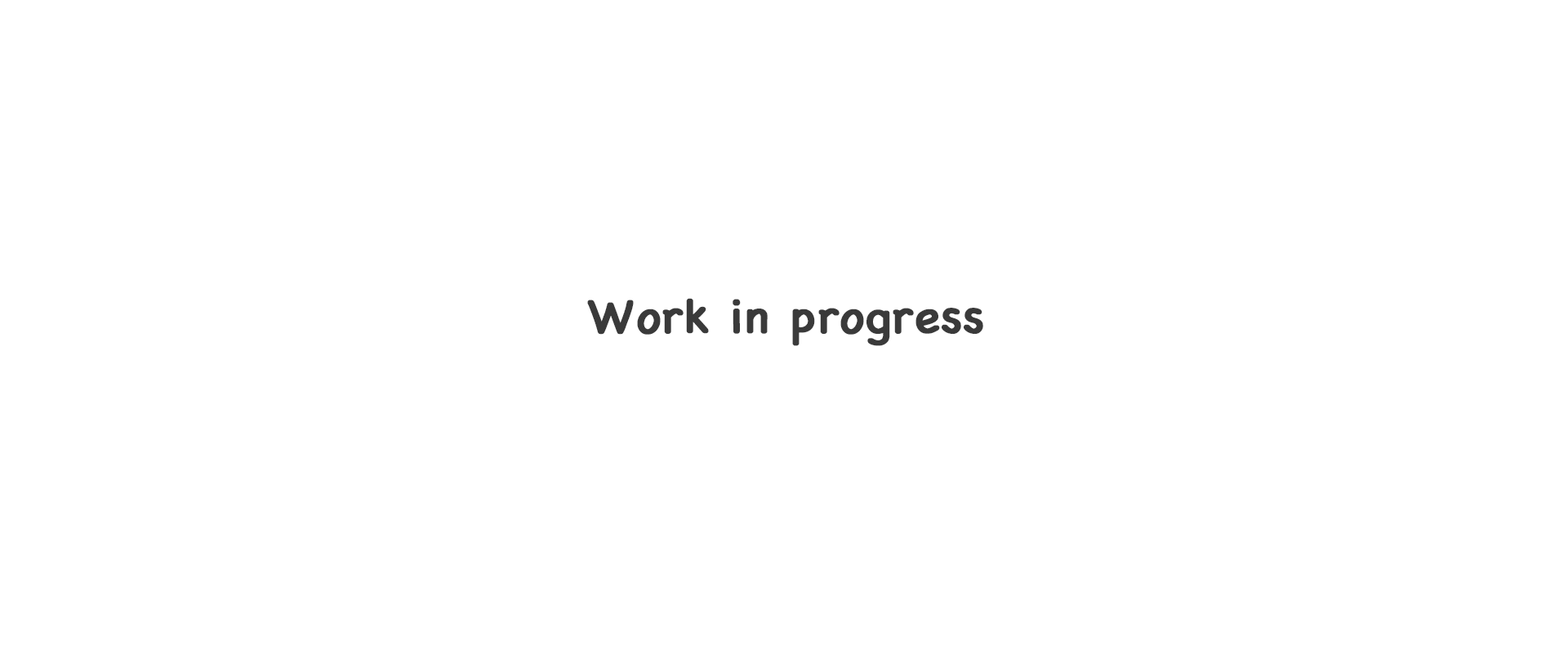
<style>
.page{position:relative;width:1568px;height:653px;background:#ffffff}
.page>*{position:absolute;margin:0}
.t1{font:47.6px "ChalkboardSE-Regular";letter-spacing:0.01em;color:#3a3a3a;font-weight:bold}
</style>
<div class="page">
<p class="t1" style="left:587px;top:298px;width:396px;height:48px">Work in progress</p>
</div>
